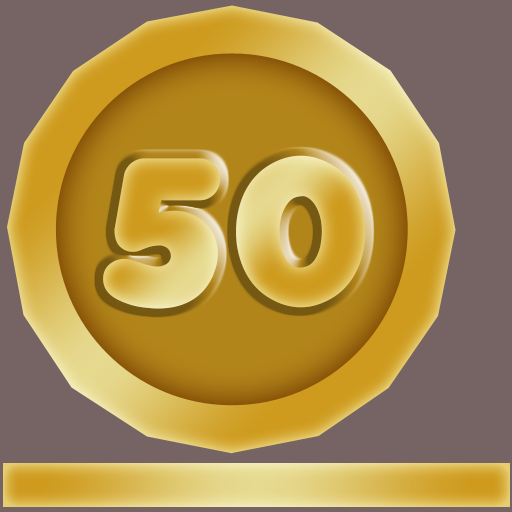
<style>
.page{position:relative;width:512px;height:512px;background:#766464}
.page>*{position:absolute;margin:0}
.t1{font:203px "Anja-Eliane-Nornal"}
</style>
<div class="page">
<p class="t1" style="left:103px;top:155px;width:263px;height:154px">50</p>
</div>
